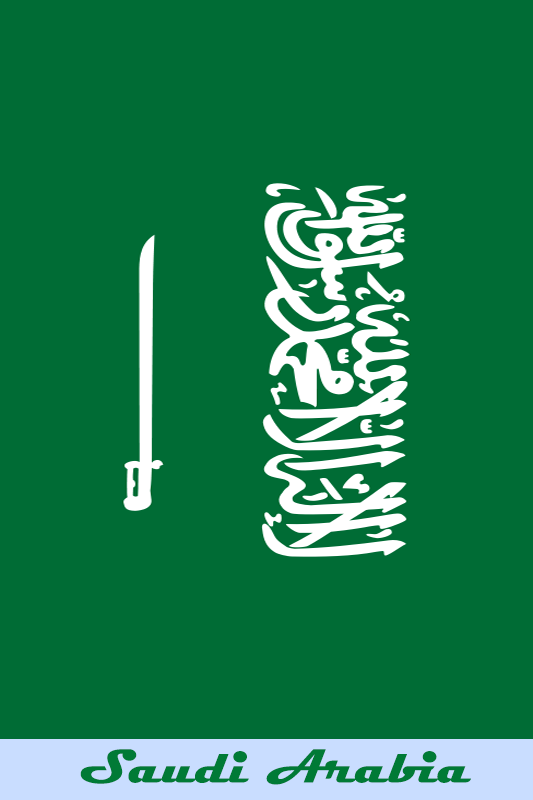
<style>
.page{position:relative;width:533px;height:800px;background:#006c35}
.page>*{position:absolute;margin:0}
.t1{font:48px "Magneto-Bold";color:#007a36;scale:1.08 1}
</style>
<div class="page">
<p class="t1" style="left:80px;top:749px;width:391px;height:36px">Saudi Arabia</p>
</div>
